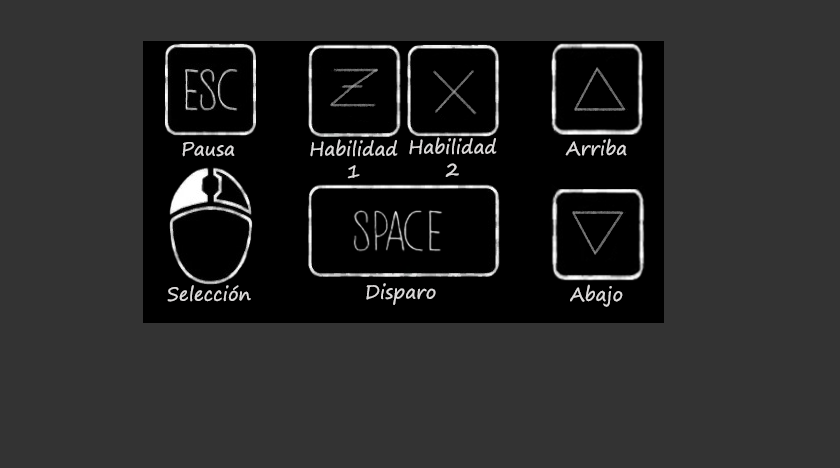
<style>
.page{position:relative;width:840px;height:468px;background:#333333}
.page>*{position:absolute;margin:0}
.t1{font:18.7px "SegoePrint";color:#dbd9d9}
</style>
<div class="page">
<p class="t1" style="left:409px;top:137px;width:88px;height:40px;text-align:center">Habilidad<br>2</p>
<p class="t1" style="left:182px;top:142px;width:53px;height:15px">Pausa</p>
<p class="t1" style="left:310px;top:139px;width:88px;height:40px;text-align:center">Habilidad<br>1</p>
<p class="t1" style="left:565px;top:138px;width:62px;height:18px">Arriba</p>
<p class="t1" style="left:167px;top:285px;width:84px;height:17px">Selección</p>
<p class="t1" style="left:366px;top:283px;width:70px;height:22px">Disparo</p>
<p class="t1" style="left:570px;top:284px;width:53px;height:23px">Abajo</p>
</div>
